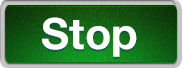
<style>
.page{position:relative;width:183px;height:68px}
.page>*{position:absolute;margin:0}
.t1{font:43.3px "HelveticaNeue-Bold";color:#ffffff}
</style>
<div class="page">
<p class="t1" style="left:42px;top:17px;width:95px;height:40px">Stop</p>
</div>
